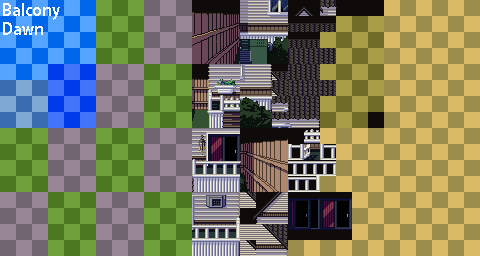
<style>
.page{position:relative;width:480px;height:256px}
.page>*{position:absolute;margin:0}
.t1{font:16px "KozGoPr6N-Bold";color:#ffffff}
</style>
<div class="page">
<p class="t1" style="left:3px;top:3px;width:57px;height:32px">Balcony <br>Dawn</p>
</div>
